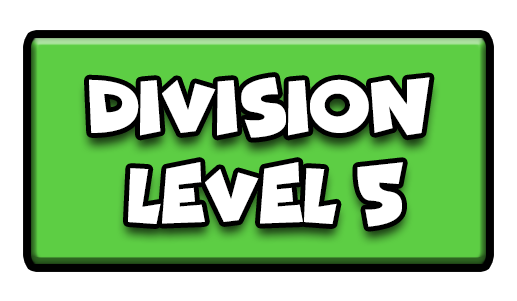
<style>
.page{position:relative;width:517px;height:301px;background:#ffffff}
.page>*{position:absolute;margin:0}
.t1{font:77.7px "Funhouse";color:#ffffff;scale:0.95 1}
</style>
<div class="page">
<p class="t1" style="left:89px;top:77px;width:341px;height:61px">DIVISION</p>
<p class="t1" style="left:128px;top:162px;width:275px;height:65px">LEVEL 5</p>
</div>
